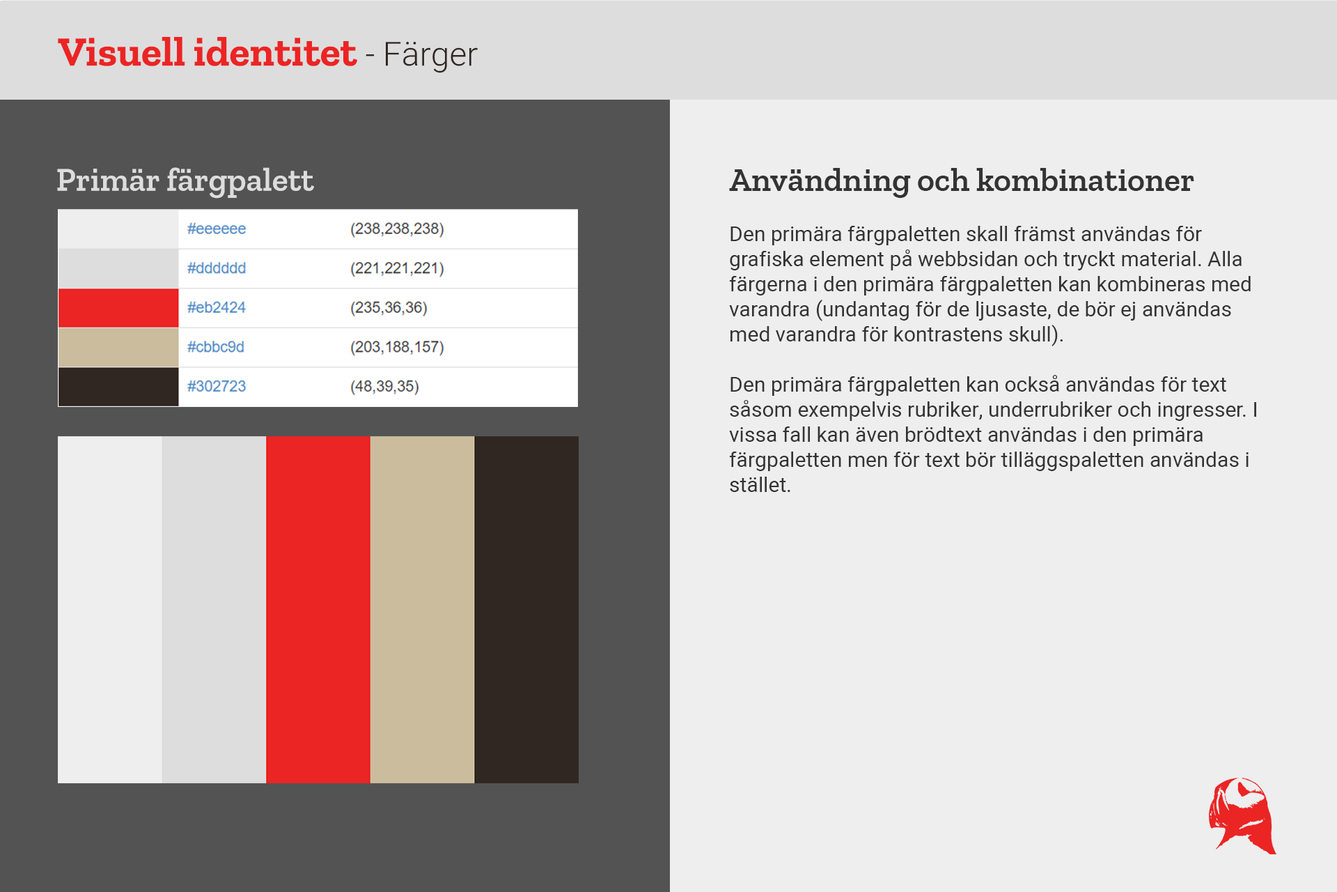
<style>
.page{position:relative;width:1337px;height:892px;background:#eeeeee}
.page>*{position:absolute;margin:0}
.t1{font:41.8px "ZillaSlab-Bold";color:#eb2424}
.t2{font:33.4px "Heebo-Light";color:#302723}
.t3{font:33.4px "ZillaSlab-SemiBold";color:#dddddd}
.t4{font:20.9px "Heebo-Regular";color:#333333}
.t5{font:33.4px "ZillaSlab-SemiBold";color:#333333}
</style>
<div class="page">
<p class="t1" style="left:58px;top:37px;width:420px;height:36px">Visuell identitet<span class="t2"> - Färger</span></p>
<p class="t3" style="left:57px;top:167px;width:257px;height:32px">Primär färgpalett</p>
<p class="t4" style="left:729px;top:168px;width:528px;height:324px"><span class="t5">Användning och kombinationer<br></span><br>Den primära färgpaletten skall främst användas för grafiska element på webbsidan och tryckt material. Alla färgerna i den primära färgpaletten kan kombineras med varandra (undantag för de ljusaste, de bör ej användas med varandra för kontrastens skull).<br><br>Den primära färgpaletten kan också användas för text såsom exempelvis rubriker, underrubriker och ingresser. I vissa fall kan även brödtext användas i den primära färgpaletten men för text bör tilläggspaletten användas i stället.</p>
</div>
